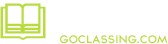
<style>
.page{position:relative;width:168px;height:44px;background:#ffffff}
.page>*{position:absolute;margin:0}
.t1{font:9.7px "TYPOGRAPHPRO-SemiBold";color:#b8db40;scale:1.03 1}
</style>
<div class="page">
<p class="t1" style="left:60px;top:35px;width:108px;height:9px">GOCLASSING.COM</p>
</div>
